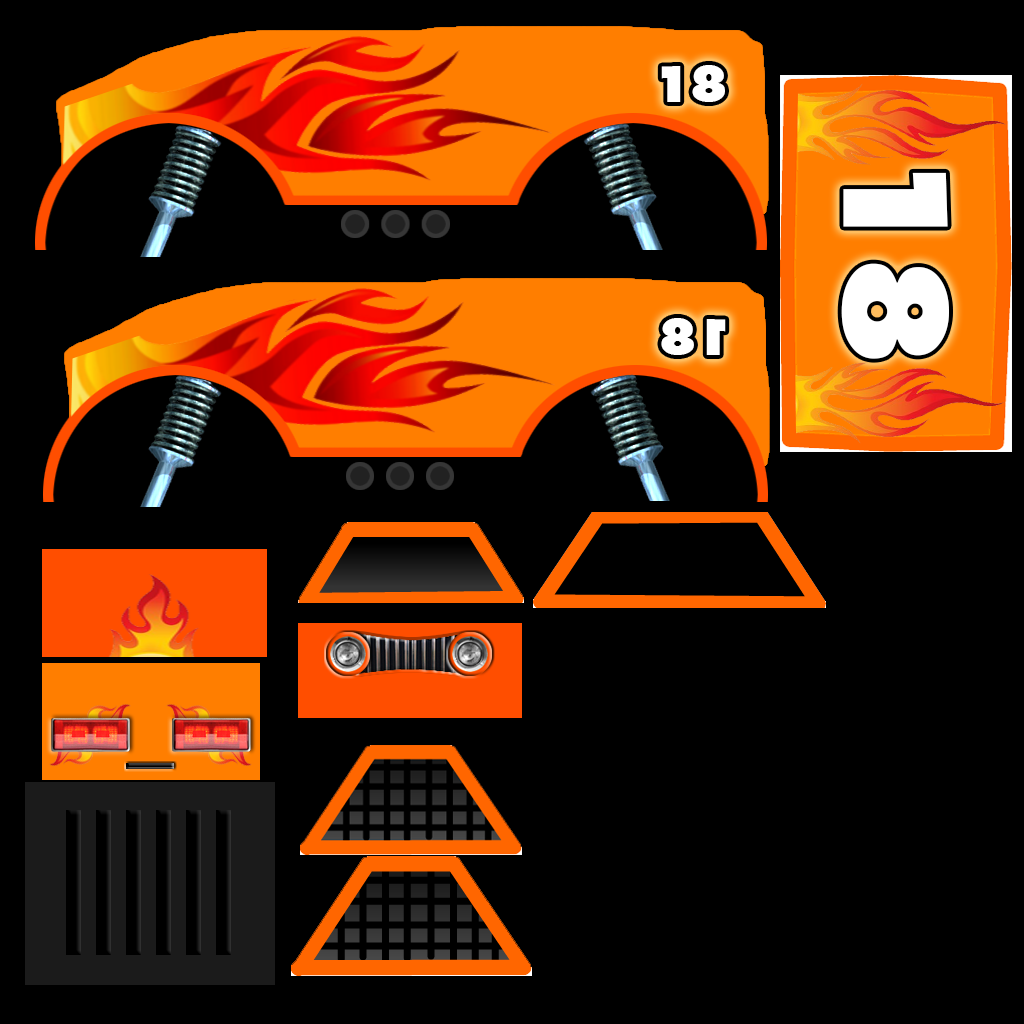
<style>
.page{position:relative;width:1024px;height:1024px;background:#000000}
.page>*{position:absolute;margin:0}
.t1{font:48px "Thehits";color:#ffffff;font-variant:small-caps}
.t2{font:140.5px "Thehits";color:#ffffff;font-variant:small-caps}
</style>
<div class="page">
<p class="t1" style="left:661px;top:65px;width:64px;height:37px">18</p>
<p class="t2" style="left:841px;top:172px;width:108px;height:187px;rotate:90deg">18</p>
<p class="t1" style="left:661px;top:318px;width:65px;height:37px;rotate:180deg">18</p>
</div>
